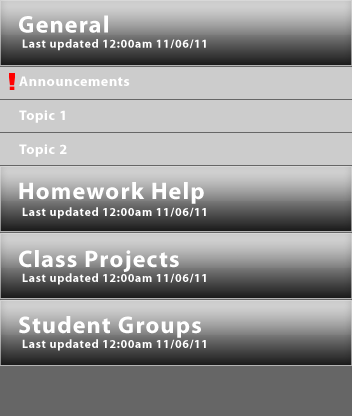
<style>
.page{position:relative;width:352px;height:416px;background:#cccccc}
.page>*{position:absolute;margin:0}
.t1{font:24px "MyriadPro-Bold";letter-spacing:0.05em;color:#ffffff}
.t2{font:12px "MyriadPro-Bold";letter-spacing:0.05em;color:#ffffff}
.t3{font:14px "MyriadPro-Bold";letter-spacing:0.05em;color:#ffffff}
</style>
<div class="page">
<p class="t1" style="left:19px;top:15px;width:89px;height:18px">General</p>
<p class="t2" style="left:22px;top:39px;width:184px;height:12px">Last updated 12:00am 11/06/11</p>
<p class="t3" style="left:19px;top:76px;width:111px;height:10px">Announcements</p>
<p class="t3" style="left:19px;top:110px;width:46px;height:13px">Topic 1</p>
<p class="t3" style="left:19px;top:144px;width:48px;height:13px">Topic 2</p>
<p class="t1" style="left:19px;top:182px;width:185px;height:22px">Homework Help</p>
<p class="t2" style="left:22px;top:207px;width:184px;height:12px">Last updated 12:00am 11/06/11</p>
<p class="t1" style="left:19px;top:250px;width:160px;height:22px">Class Projects</p>
<p class="t2" style="left:22px;top:273px;width:184px;height:12px">Last updated 12:00am 11/06/11</p>
<p class="t1" style="left:19px;top:316px;width:182px;height:22px">Student Groups</p>
<p class="t2" style="left:22px;top:339px;width:184px;height:12px">Last updated 12:00am 11/06/11</p>
</div>
